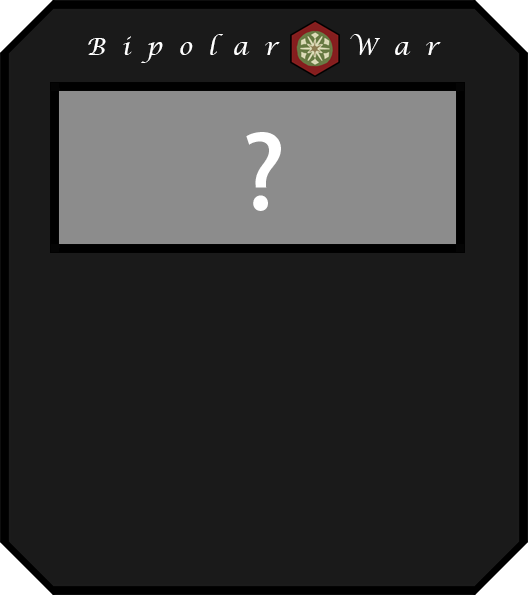
<style>
.page{position:relative;width:528px;height:595px;background:#1a1a1a}
.page>*{position:absolute;margin:0}
.t1{font:24px "LucidaCalligraphy-Italic";color:#ffffff}
.t2{font:100px "AdobeHeitiStd-Regular";color:#ffffff}
</style>
<div class="page">
<p class="t1" style="left:88px;top:34px;width:353px;height:29px">B  i  p  o  l  a  r         W  a  r</p>
<p class="t2" style="left:246px;top:132px;width:35px;height:79px">?</p>
</div>
